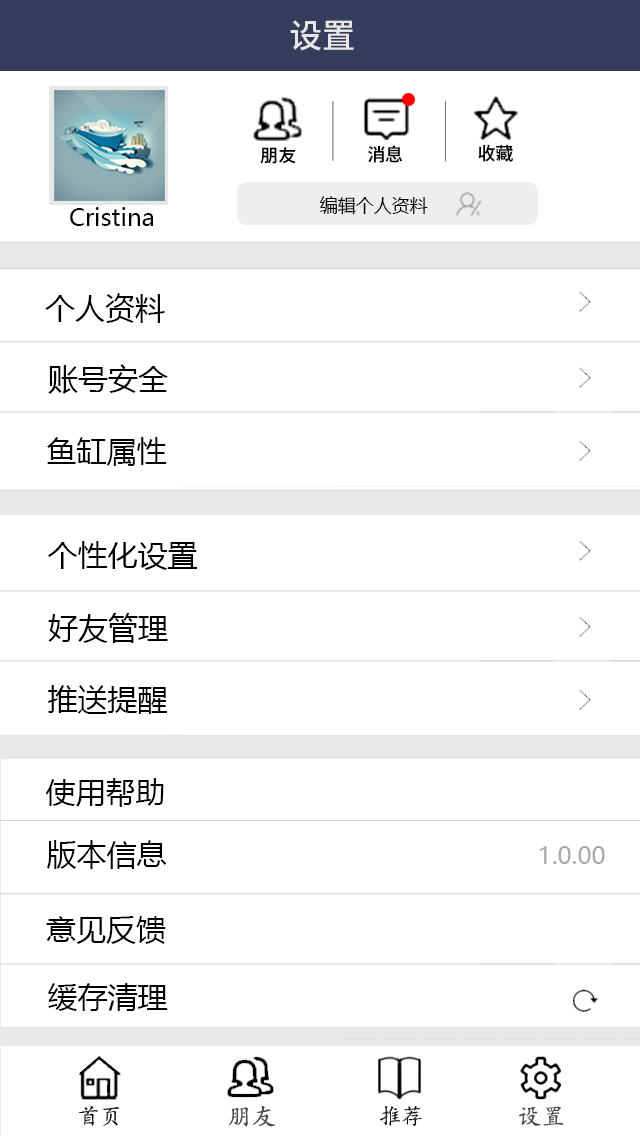
<style>
.page{position:relative;width:640px;height:1136px;background:#ffffff}
.page>*{position:absolute;margin:0}
.t1{font:33.6px "SourceHanSansCN-Medium";color:#e6e6e6}
.t2{font:18px "SourceHanSansCN-Medium";color:#000000}
.t3{font:18px "MicrosoftYaHeiUI";color:#000000}
.t4{font:24px "MicrosoftYaHeiUI";color:#000000}
.t5{font:30px "MicrosoftYaHeiUI";color:#000000}
.t6{font:24px "MicrosoftYaHeiUI";color:#a7a7a7}
</style>
<div class="page">
<p class="t1" style="left:290px;top:20px;width:64px;height:31px">设置</p>
<p class="t2" style="left:260px;top:147px;width:36px;height:17px">朋友</p>
<p class="t2" style="left:368px;top:145px;width:34px;height:18px">消息</p>
<p class="t2" style="left:478px;top:144px;width:35px;height:18px">收藏</p>
<p class="t3" style="left:320px;top:196px;width:108px;height:19px">编辑个人资料</p>
<p class="t4" style="left:70px;top:207px;width:83px;height:19px">Cristina</p>
<p class="t5" style="left:45px;top:293px;width:120px;height:30px">个人资料</p>
<p class="t5" style="left:48px;top:364px;width:120px;height:30px">账号安全</p>
<p class="t5" style="left:47px;top:437px;width:120px;height:29px">鱼缸属性</p>
<p class="t5" style="left:47px;top:541px;width:150px;height:29px">个性化设置</p>
<p class="t5" style="left:48px;top:613px;width:120px;height:30px">好友管理</p>
<p class="t5" style="left:48px;top:685px;width:119px;height:29px">推送提醒</p>
<p class="t5" style="left:46px;top:778px;width:118px;height:29px">使用帮助</p>
<p class="t5" style="left:46px;top:840px;width:121px;height:29px">版本信息</p>
<p class="t6" style="left:540px;top:846px;width:65px;height:18px">1.0.00</p>
<p class="t5" style="left:46px;top:916px;width:120px;height:28px">意见反馈</p>
<p class="t5" style="left:48px;top:983px;width:120px;height:28px">缓存清理</p>
</div>
